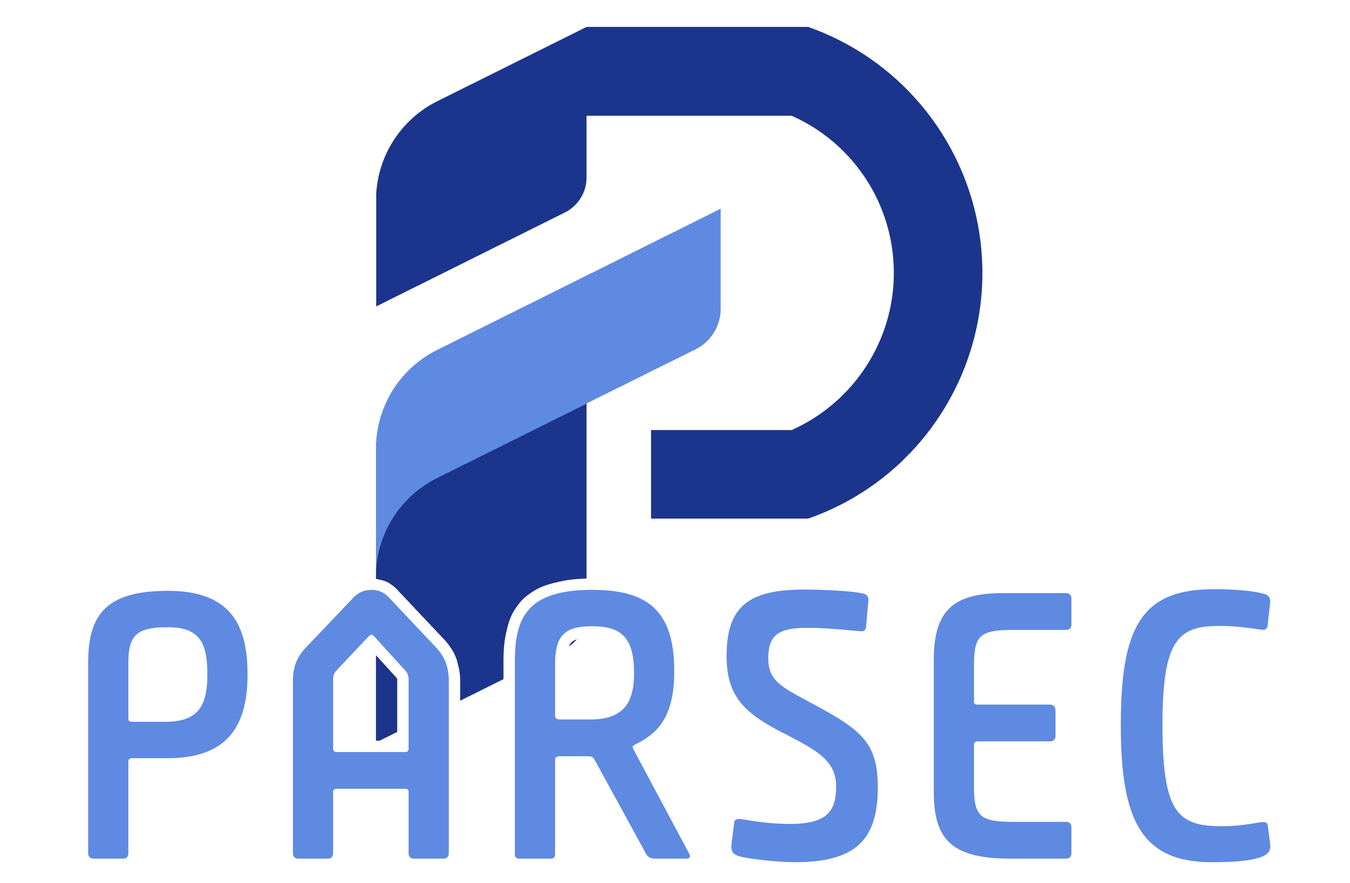
<style>
.page{position:relative;width:1350px;height:883px;background:#ffffff}
.page>*{position:absolute;margin:0}
.t1{font:379.2px "Plau-Medium";color:#5f8ae2}
</style>
<div class="page">
<p class="t1" style="left:88px;top:589px;width:1183px;height:273px">PARSEC</p>
</div>
